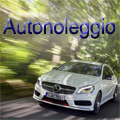
<style>
.page{position:relative;width:120px;height:120px}
.page>*{position:absolute;margin:0}
.t1{font:22px "ArialMT";scale:0.88 1}
</style>
<div class="page">
<p class="t1" style="left:3px;top:18px;width:113px;height:21px">Autonoleggio</p>
</div>
